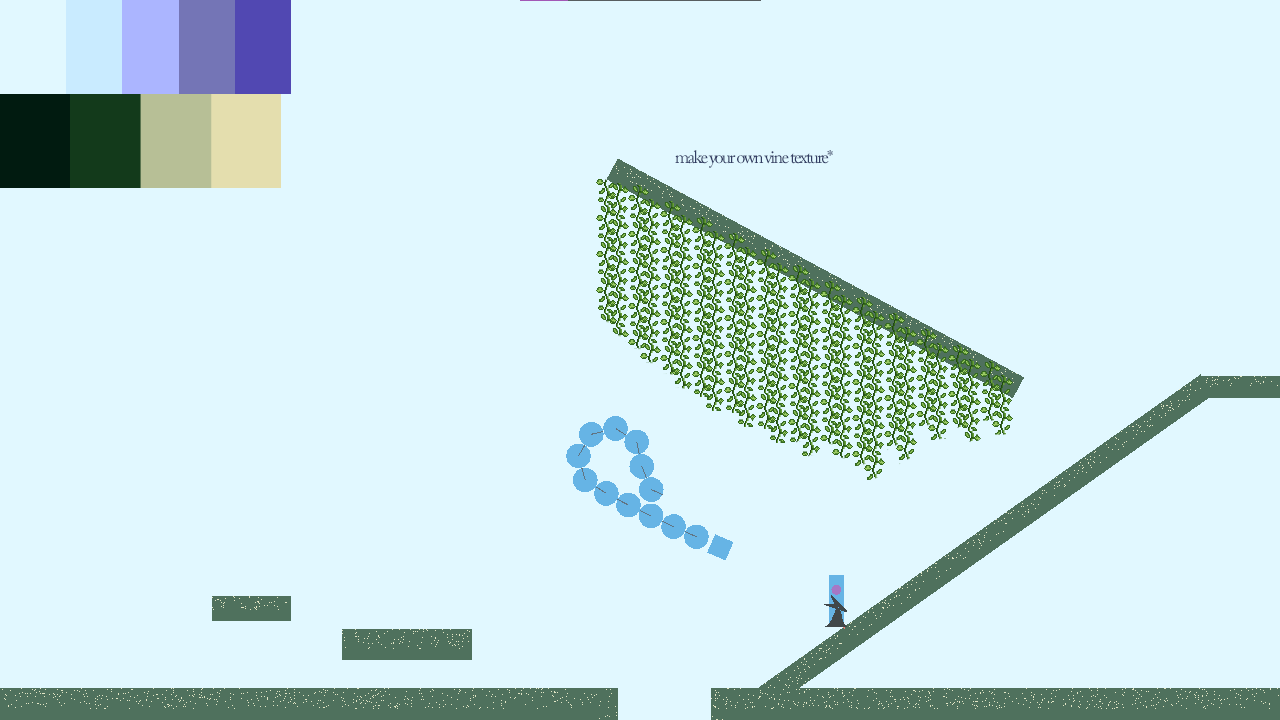
<style>
.page{position:relative;width:1280px;height:720px;background:#e1f8ff}
.page>*{position:absolute;margin:0}
.t1{font:18px "ACaslonPro-Regular";letter-spacing:-0.1em;color:#313d63}
</style>
<div class="page">
<p class="t1" style="left:675px;top:150px;width:158px;height:18px">make your own vine texture*</p>
</div>
